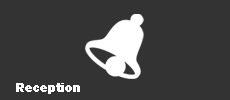
<style>
.page{position:relative;width:230px;height:100px;background:#333333}
.page>*{position:absolute;margin:0}
.t1{font:13px "FranklinGothic-Heavy";color:#fefefe}
</style>
<div class="page">
<p class="t1" style="left:16px;top:83px;width:64px;height:11px">Reception</p>
</div>
